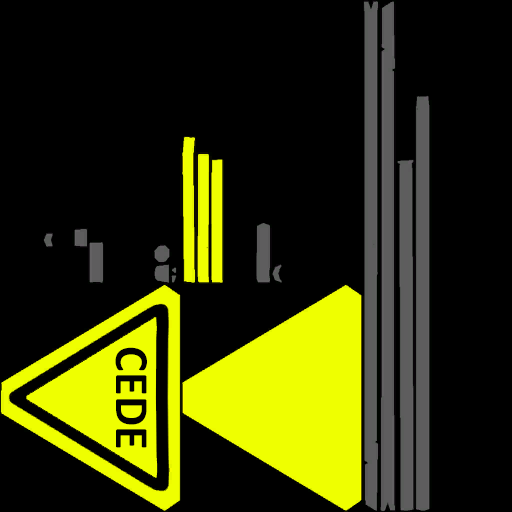
<style>
.page{position:relative;width:512px;height:512px;background:#000000}
.page>*{position:absolute;margin:0}
.t1{font:48.3px "Calibri-Bold";color:#010100}
</style>
<div class="page">
<p class="t1" style="left:115px;top:347px;width:32px;height:101px;rotate:90deg">CEDE</p>
</div>
